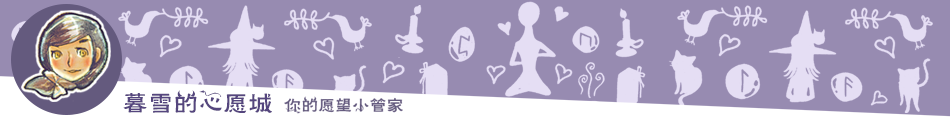
<style>
.page{position:relative;width:950px;height:120px;background:#978bb1}
.page>*{position:absolute;margin:0}
.t1{font:25.1px "FZHLJW--GB1-0";color:#55467e}
.t2{font:17.1px "FZHLJW--GB1-0";color:#645a7e}
</style>
<div class="page">
<p class="t1" style="left:123px;top:90px;width:149px;height:23px">暮雪的心愿城</p>
<p class="t2" style="left:284px;top:96px;width:119px;height:18px">你的愿望小管家</p>
</div>
